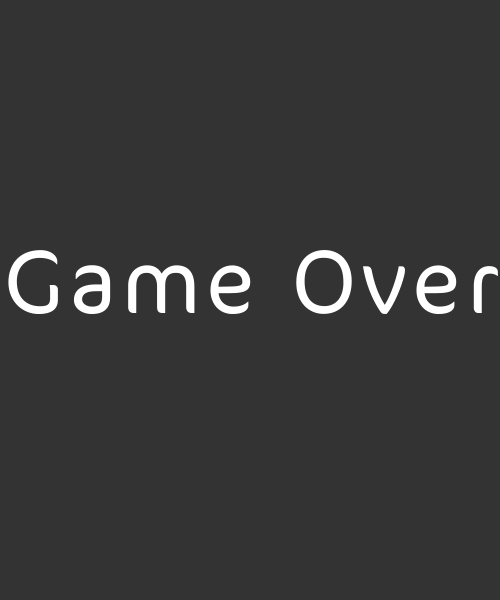
<style>
.page{position:relative;width:500px;height:600px;background:#333333}
.page>*{position:absolute;margin:0}
.t1{font:103px "CoconNextArabic-Light";letter-spacing:0.04em;color:#ffffff}
</style>
<div class="page">
<p class="t1" style="left:8px;top:250px;width:490px;height:64px">Game Over</p>
</div>
